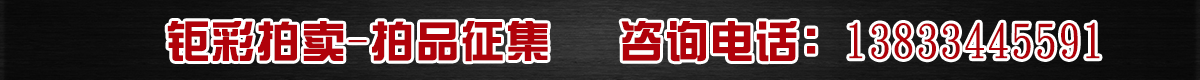
<style>
.page{position:relative;width:1200px;height:80px}
.page>*{position:absolute;margin:0}
.t1{font:44px "DFZongYi-Bd-80-Win-GB";color:#b0020a;font-weight:bold}
</style>
<div class="page">
<p class="t1" style="left:167px;top:21px;width:381px;height:41px">钜彩拍卖-拍品征集</p>
<p class="t1" style="left:621px;top:21px;width:479px;height:41px">咨询电话：13833445591</p>
</div>
